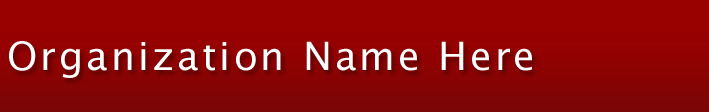
<style>
.page{position:relative;width:709px;height:112px;background:#990000}
.page>*{position:absolute;margin:0}
.t1{font:39px "LucidaSans";letter-spacing:0.075em;color:#ffffff}
</style>
<div class="page">
<p class="t1" style="left:9px;top:41px;width:523px;height:37px">Organization Name Here</p>
</div>
